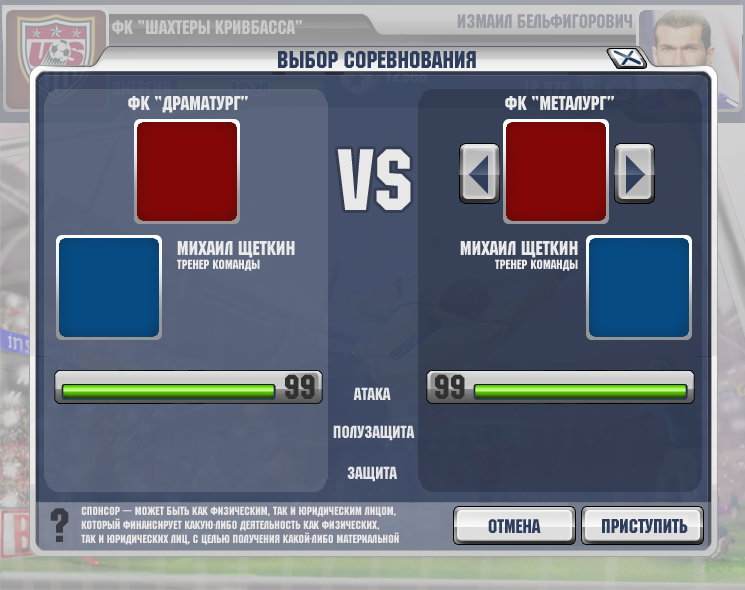
<style>
.page{position:relative;width:745px;height:590px}
.page>*{position:absolute;margin:0}
.t1{font:24.3px "MachineCTT";color:#2f3d5c}
.t2{font:20.1px "MachineCTT";color:#eaeaea}
.t3{font:13.4px "MachineCTT";color:#eaeaea}
.t4{font:34.8px "MachineCTT";color:#313131}
.t5{font:17.4px "MachineCTT";color:#e5e5e5}
.t6{font:11.8px "MachineCTT";color:#ece8e8}
</style>
<div class="page">
<p class="t1" style="left:278px;top:51px;width:198px;height:17px">выбор соревнования</p>
<p class="t2" style="left:128px;top:96px;width:120px;height:17px">фк “драматург”</p>
<p class="t2" style="left:505px;top:96px;width:109px;height:14px">фк “Металург”</p>
<p class="t2" style="left:177px;top:241px;width:118px;height:17px">Михаил Щеткин</p>
<p class="t2" style="left:460px;top:241px;width:118px;height:17px">Михаил Щеткин</p>
<p class="t3" style="left:177px;top:259px;width:83px;height:12px">тренер команды</p>
<p class="t3" style="left:495px;top:259px;width:83px;height:12px">тренер команды</p>
<p class="t4" style="left:285px;top:374px;width:30px;height:25px">99</p>
<p class="t4" style="left:435px;top:374px;width:30px;height:25px">99</p>
<p class="t5" style="left:353px;top:387px;width:38px;height:13px">атака</p>
<p class="t5" style="left:333px;top:425px;width:82px;height:16px">полузащита</p>
<p class="t5" style="left:347px;top:466px;width:50px;height:16px">защита</p>
<p class="t6" style="left:81px;top:506px;width:318px;height:39px">Спонсор — может быть как физическим, так и юридическим лицом, <br>который финансирует какую-либо деятельность как физических,<br>так и юридических лиц, c целью получения какой-либо материальной</p>
</div>
